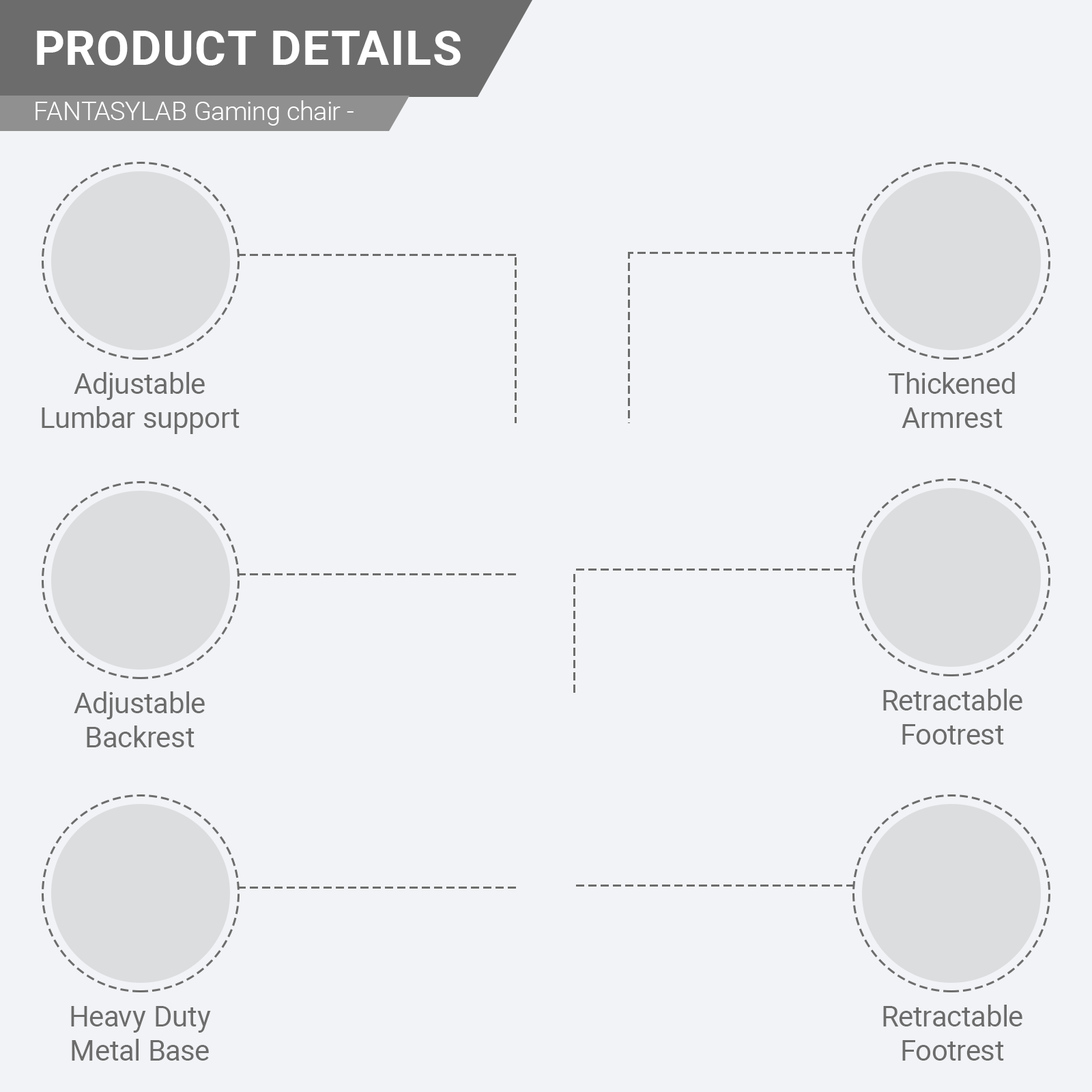
<style>
.page{position:relative;width:1092px;height:1092px;background:#f2f3f6}
.page>*{position:absolute;margin:0}
.t1{font:47.8px "Roboto-Bold";color:#ffffff;text-transform:uppercase}
.t2{font:25.9px "Roboto-Light";color:#ffffff}
.t3{font:28.7px "Roboto-Regular";color:#6c6c6c}
</style>
<div class="page">
<p class="t1" style="left:37px;top:31px;width:424px;height:35px">Product details</p>
<p class="t2" style="left:35px;top:100px;width:319px;height:26px">FANTASYLAB Gaming chair -</p>
<p class="t3" style="left:42px;top:372px;width:198px;height:62px;text-align:center">Adjustable<br>Lumbar support</p>
<p class="t3" style="left:889px;top:372px;width:126px;height:56px;text-align:center">Thickened<br>Armrest</p>
<p class="t3" style="left:883px;top:689px;width:139px;height:56px;text-align:center">Retractable<br>Footrest</p>
<p class="t3" style="left:74px;top:691px;width:131px;height:56px;text-align:center">Adjustable<br>Backrest</p>
<p class="t3" style="left:71px;top:1006px;width:140px;height:55px;text-align:center">Heavy Duty<br>Metal Base</p>
<p class="t3" style="left:883px;top:1005px;width:139px;height:56px;text-align:center">Retractable<br>Footrest</p>
</div>
